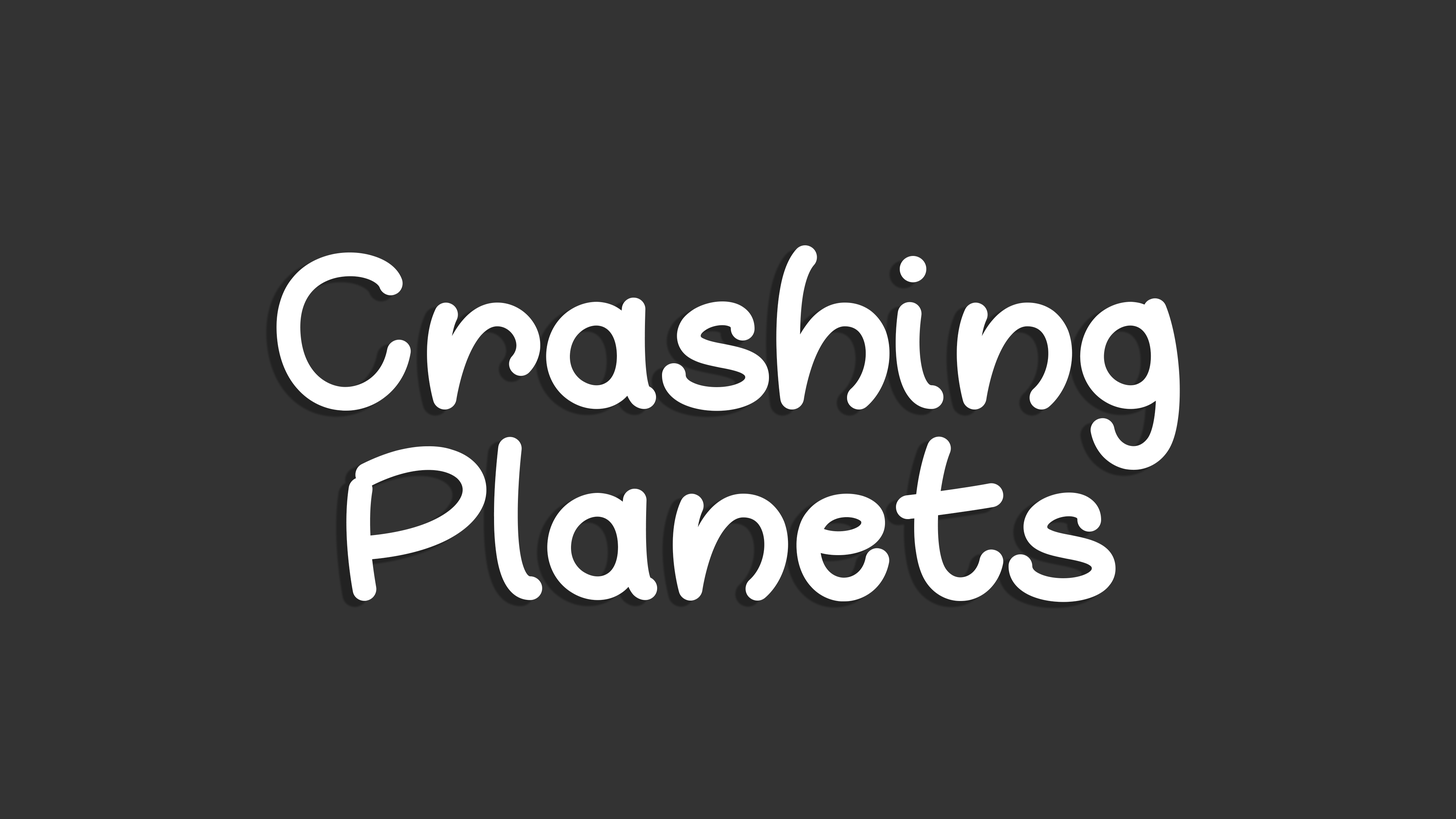
<style>
.page{position:relative;width:1456px;height:819px;background:#333333}
.page>*{position:absolute;margin:0}
.t1{font:237px/191.2px "OhWhale";color:#ffffff}
</style>
<div class="page">
<p class="t1" style="left:276px;top:245px;width:904px;height:357px;text-align:center">Crashing <br>Planets</p>
</div>
